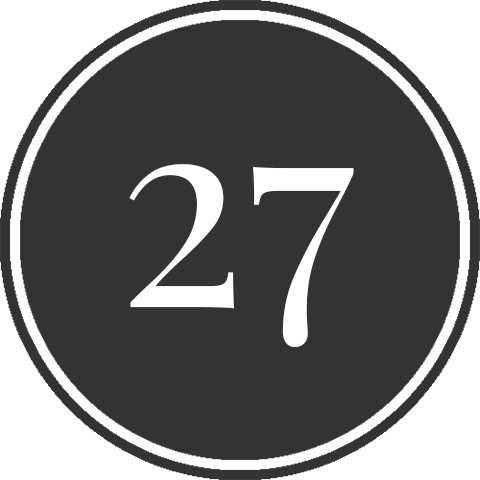
<style>
.page{position:relative;width:480px;height:480px;background:#333333}
.page>*{position:absolute;margin:0}
.t1{font:270px "PlayfairDisplay-Regular";color:#ffffff}
</style>
<div class="page">
<p class="t1" style="left:129px;top:164px;width:225px;height:183px">27</p>
</div>
